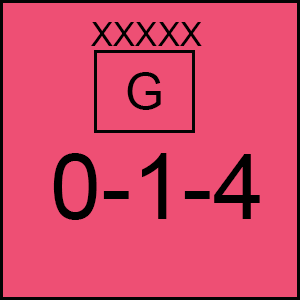
<style>
.page{position:relative;width:300px;height:300px;background:#ee4f74}
.page>*{position:absolute;margin:0}
.t1{font:33.3px "ArialMT";color:#000000}
.t2{font:50px "ArialMT";color:#000000}
.t3{font:91.7px "ArialMT";color:#000000}
</style>
<div class="page">
<p class="t1" style="left:91px;top:22px;width:111px;height:24px">XXXXX</p>
<p class="t2" style="left:127px;top:72px;width:34px;height:38px">G</p>
<p class="t3" style="left:53px;top:153px;width:207px;height:67px">0-1-4</p>
</div>
